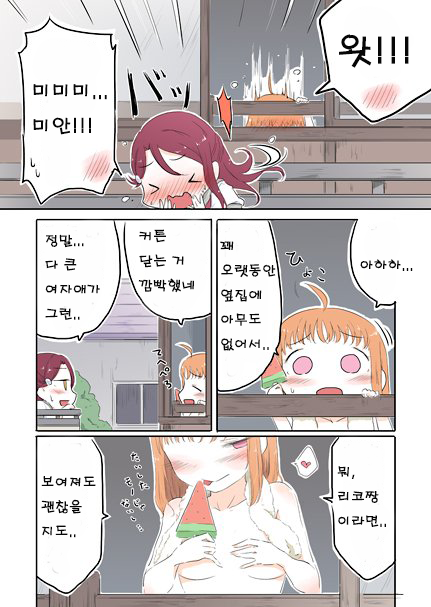
<style>
.page{position:relative;width:431px;height:607px;background:#ffffff}
.page>*{position:absolute;margin:0}
.t1{font:36px "H2porM";color:#060606}
.t2{font:20px "H2porM";color:#060606}
.t3{font:14px "H2porM";color:#060606}
</style>
<div class="page">
<p class="t1" style="left:339px;top:34px;width:70px;height:34px">왓!!!</p>
<p class="t2" style="left:33px;top:84px;width:74px;height:51px">미미미...<br>미안!!!</p>
<p class="t3" style="left:138px;top:229px;width:56px;height:64px">커튼<br>닫는 거<br>깜빡했네</p>
<p class="t3" style="left:45px;top:234px;width:55px;height:86px">정말...<br>다 큰<br>여자애가<br>그런..</p>
<p class="t3" style="left:220px;top:241px;width:56px;height:110px">꽤<br>오랫동안<br>옆집에<br>아무도<br>없어서..</p>
<p class="t3" style="left:360px;top:259px;width:53px;height:12px">아하하...</p>
<p class="t3" style="left:337px;top:466px;width:49px;height:61px">뭐,<br>리코짱<br>이라면..</p>
<p class="t3" style="left:41px;top:476px;width:55px;height:62px">보여져도<br>괜찮을<br>지도..</p>
</div>
